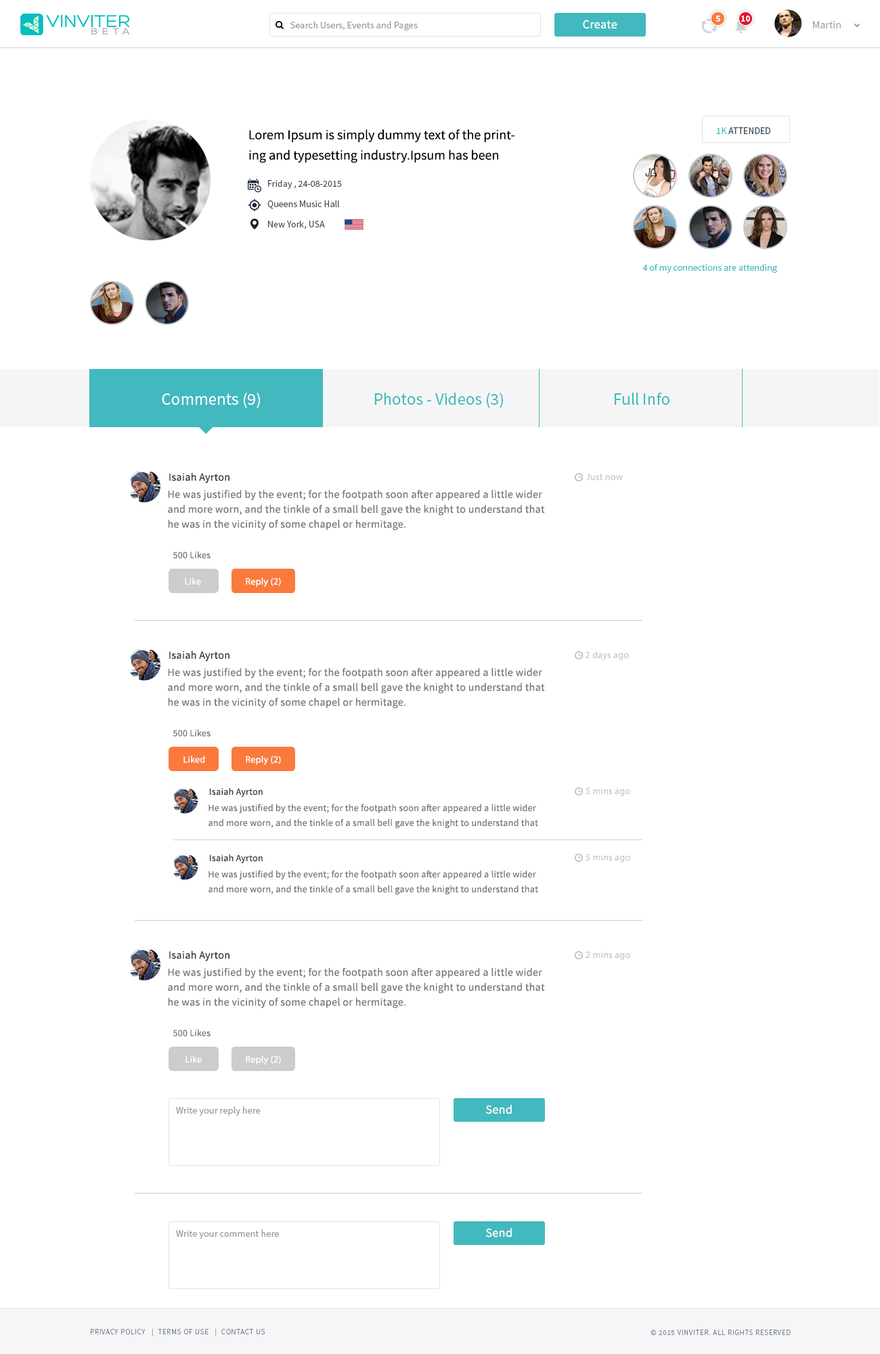
<style>
.page{position:relative;width:880px;height:1354px;background:#ffffff}
.page>*{position:absolute;margin:0}
.t1{font:8.8px "SourceSansPro-Bold";color:#ffffff}
.t2{font:9.7px "SourceSansPro-Regular";color:#999999}
.t3{font:12.2px "SourceSansPro-Regular";letter-spacing:0.02em;color:#ffffff}
.t4{font:10.8px "SourceSansPro-Regular";color:#a3a6ae}
.t5{font:13.5px/20.3px "SourceSansPro-Regular";color:#000000}
.t6{font:9.5px "SourceSansPro-Regular";color:#364656}
.t7{font:9.5px "SourceSansPro-Regular";color:#42b9be}
.t8{font:9.5px/13.5px "SourceSansPro-Regular";color:#464d5c}
.t9{font:16.9px "SourceSansPro-Regular";color:#fefefe}
.t10{font:16.9px "SourceSansPro-Regular";color:#42b9be}
.t11{font:10.8px "SourceSansPro-Regular";letter-spacing:0.02em;color:#383737}
.t12{font:9.5px "MyriadPro-Regular";letter-spacing:0.02em;color:#c6ccd2}
.t13{font:10.8px/14.9px "SourceSansPro-Regular";letter-spacing:0.02em;color:#767676}
.t14{font:9.5px "SourceSansPro-Regular";letter-spacing:0.02em;color:#767676}
.t15{font:9.5px "SourceSansPro-Regular";letter-spacing:0.02em;color:#ffffff}
.t16{font:9.5px "MyriadPro-Regular";letter-spacing:0.02em;color:#ffffff}
.t17{font:9.5px "SourceSansPro-Regular";letter-spacing:0.02em;color:#383737}
.t18{font:9.5px/14.9px "SourceSansPro-Regular";letter-spacing:0.02em;color:#767676}
.t19{font:7.4px "SourceSansPro-Light";letter-spacing:0.075em;color:#747a85;text-transform:uppercase}
</style>
<div class="page">
<p class="t1" style="left:716px;top:16px;width:5px;height:6px">5</p>
<p class="t1" style="left:742px;top:16px;width:8px;height:6px">10</p>
<p class="t2" style="left:291px;top:21px;width:127px;height:10px">Search Users, Events and Pages</p>
<p class="t3" style="left:583px;top:20px;width:35px;height:9px">Create</p>
<p class="t4" style="left:813px;top:21px;width:28px;height:7px">Martin</p>
<p class="t5" style="left:249px;top:129px;width:266px;height:34px">Lorem Ipsum is simply dummy text of the printing and typesetting industry.Ipsum has been</p>
<p class="t6" style="left:717px;top:127px;width:54px;height:7px"><span class="t7">1K </span>ATTENDED</p>
<p class="t8" style="left:268px;top:180px;width:74px;height:50px">Friday , 24-08-2015<br>Queens Music Hall<br>New York, USA</p>
<p class="t7" style="left:643px;top:264px;width:134px;height:9px">4 of my connections are attending</p>
<p class="t9" style="left:162px;top:393px;width:98px;height:15px">Comments (9)</p>
<p class="t10" style="left:375px;top:393px;width:128px;height:15px">Photos - Videos (3)</p>
<p class="t10" style="left:615px;top:393px;width:55px;height:12px">Full Info</p>
<p class="t11" style="left:169px;top:473px;width:61px;height:11px">Isaiah Ayrton</p>
<p class="t12" style="left:586px;top:473px;width:37px;height:8px">Just now</p>
<p class="t13" style="left:168px;top:490px;width:377px;height:40px">He was justified by the event; for the footpath soon after appeared a little wider and more worn, and the tinkle of a small bell gave the knight to understand that he was in the vicinity of some chapel or hermitage.</p>
<p class="t14" style="left:173px;top:551px;width:38px;height:8px">500 Likes</p>
<p class="t15" style="left:185px;top:578px;width:16px;height:7px">Like</p>
<p class="t16" style="left:246px;top:578px;width:35px;height:9px">Reply (2)</p>
<p class="t11" style="left:169px;top:651px;width:61px;height:11px">Isaiah Ayrton</p>
<p class="t12" style="left:586px;top:651px;width:43px;height:10px">2 days ago</p>
<p class="t13" style="left:168px;top:668px;width:377px;height:40px">He was justified by the event; for the footpath soon after appeared a little wider and more worn, and the tinkle of a small bell gave the knight to understand that he was in the vicinity of some chapel or hermitage.</p>
<p class="t14" style="left:173px;top:729px;width:38px;height:8px">500 Likes</p>
<p class="t15" style="left:184px;top:756px;width:21px;height:7px">Liked</p>
<p class="t16" style="left:246px;top:756px;width:35px;height:9px">Reply (2)</p>
<p class="t17" style="left:210px;top:788px;width:53px;height:9px">Isaiah Ayrton</p>
<p class="t12" style="left:586px;top:788px;width:44px;height:8px">5 mins ago</p>
<p class="t18" style="left:209px;top:804px;width:329px;height:25px">He was justified by the event; for the footpath soon after appeared a little wider <br>and more worn, and the tinkle of a small bell gave the knight to understand that</p>
<p class="t17" style="left:210px;top:855px;width:53px;height:8px">Isaiah Ayrton</p>
<p class="t12" style="left:586px;top:854px;width:44px;height:9px">5 mins ago</p>
<p class="t18" style="left:209px;top:870px;width:329px;height:25px">He was justified by the event; for the footpath soon after appeared a little wider <br>and more worn, and the tinkle of a small bell gave the knight to understand that</p>
<p class="t11" style="left:169px;top:951px;width:61px;height:11px">Isaiah Ayrton</p>
<p class="t12" style="left:586px;top:951px;width:44px;height:9px">2 mins ago</p>
<p class="t13" style="left:168px;top:968px;width:377px;height:40px">He was justified by the event; for the footpath soon after appeared a little wider and more worn, and the tinkle of a small bell gave the knight to understand that he was in the vicinity of some chapel or hermitage.</p>
<p class="t14" style="left:173px;top:1029px;width:38px;height:8px">500 Likes</p>
<p class="t15" style="left:186px;top:1056px;width:16px;height:7px">Like</p>
<p class="t16" style="left:246px;top:1056px;width:35px;height:9px">Reply (2)</p>
<p class="t2" style="left:176px;top:1107px;width:85px;height:9px">Write your reply here</p>
<p class="t3" style="left:486px;top:1105px;width:26px;height:10px">Send</p>
<p class="t2" style="left:176px;top:1230px;width:103px;height:9px">Write your comment here</p>
<p class="t3" style="left:486px;top:1228px;width:26px;height:10px">Send</p>
<p class="t19" style="left:90px;top:1329px;width:175px;height:8px">Privacy Policy   |  Terms of Use   |  Contact us</p>
<p class="t19" style="left:651px;top:1330px;width:140px;height:5px">© 2015 VINVITER. All rights reserved</p>
</div>
